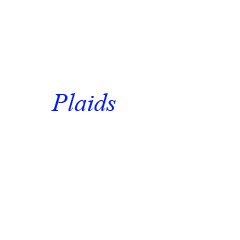
<style>
.page{position:relative;width:240px;height:240px;background:#ffffff}
.page>*{position:absolute;margin:0}
.t1{font:25px "TimesNewRomanPS-ItalicMT";color:#0018ff}
</style>
<div class="page">
<p class="t1" style="left:51px;top:93px;width:65px;height:18px">Plaids</p>
</div>
